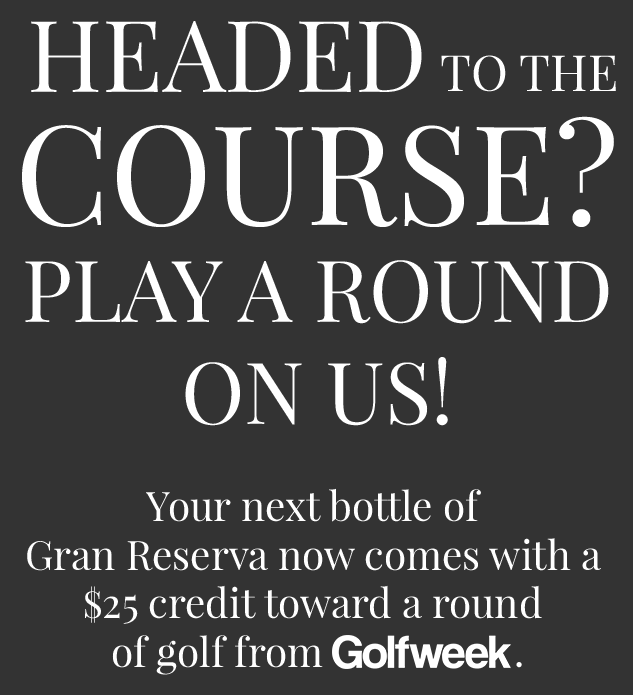
<style>
.page{position:relative;width:633px;height:695px;background:#333333}
.page>*{position:absolute;margin:0}
.t1{font:99.5px "PlayfairDisplay-Regular";color:#ffffff}
.t2{font:49.7px "PlayfairDisplay-Regular";color:#ffffff}
.t3{font:138.1px "PlayfairDisplay-Regular";color:#ffffff}
.t4{font:40.4px "PlayfairDisplay-Regular";color:#ffffff}
.t5{font:85.7px "PlayfairDisplay-Regular";color:#ffffff}
.t6{font:37.3px "PlayfairDisplay-Regular";color:#ffffff}
</style>
<div class="page">
<p class="t1" style="left:31px;top:21px;width:391px;height:71px">HEADED</p>
<p class="t2" style="left:441px;top:55px;width:175px;height:37px">TO THE</p>
<p class="t3" style="left:22px;top:116px;width:592px;height:111px">COURSE?</p>
<p class="t4" style="left:25px;top:260px;width:584px;height:415px;text-align:center"><span class="t5">PLAY A ROUND<br></span><span class="t5">ON US!<br><br></span>Your next bottle of <br>Gran Reserva now comes with a <br><span class="t6">$</span>25 credit toward a round <br>of golf from                   .</p>
</div>
